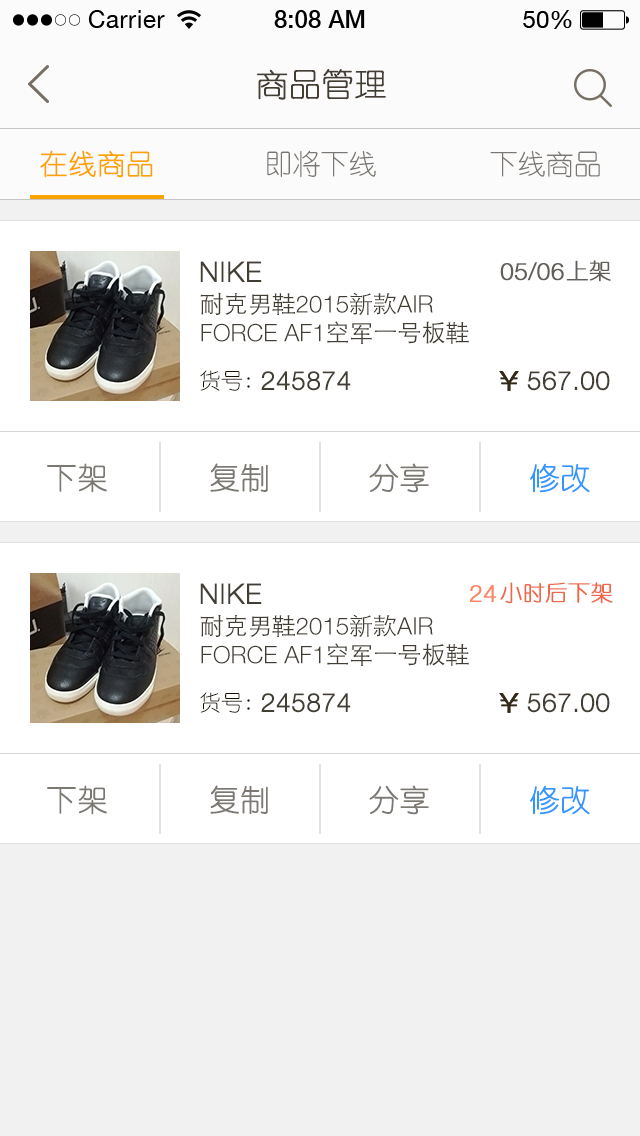
<style>
.page{position:relative;width:640px;height:1136px;background:#ffffff}
.page>*{position:absolute;margin:0}
.t1{font:32px "YouYuan";color:#433d33;text-transform:uppercase;font-weight:bold}
.t2{font:28px "YouYuan";color:#fea200;text-transform:uppercase;font-weight:bold}
.t3{font:28px "YouYuan";color:#7a7772;text-transform:uppercase}
.t4{font:28px "HelveticaNeueLTPro-Lt";color:#433e34;text-transform:uppercase;font-weight:bold}
.t5{font:24px "HelveticaNeueLTPro-Lt";color:#625e58;text-transform:uppercase;font-weight:bold}
.t6{font:22px "YouYuan";color:#625e58;text-transform:uppercase;font-weight:bold}
.t7{font:24px "HelveticaNeueLTPro-Lt";color:#433e34;text-transform:uppercase}
.t8{font:24px "STHeitiSC-Light";color:#433e34;text-transform:uppercase}
.t9{font:22px "YouYuan";color:#1b1100;text-transform:uppercase}
.t10{font:26px "HelveticaNeueLTPro-Lt";color:#433e34;text-transform:uppercase;font-weight:bold}
.t11{font:30px "YouYuan";color:#7c7973;text-transform:uppercase;font-weight:bold}
.t12{font:30px "YouYuan";color:#3496ff;text-transform:uppercase;font-weight:bold}
.t13{font:22px "YouYuan";color:#ef6746;text-transform:uppercase;font-weight:bold}
.t14{font:24px "HelveticaNeueLTPro-Lt";color:#ff8462;text-transform:uppercase;font-weight:bold}
</style>
<div class="page">
<p class="t1" style="left:257px;top:69px;width:129px;height:31px">商品管理</p>
<p class="t2" style="left:40px;top:150px;width:113px;height:28px">在线商品</p>
<p class="t3" style="left:267px;top:150px;width:109px;height:28px">即将下线</p>
<p class="t3" style="left:490px;top:150px;width:110px;height:28px">下线商品</p>
<p class="t4" style="left:200px;top:261px;width:62px;height:21px">NIKE</p>
<p class="t5" style="left:500px;top:262px;width:64px;height:19px">05/06</p>
<p class="t6" style="left:566px;top:260px;width:45px;height:22px">上架</p>
<p class="t7" style="left:200px;top:292px;width:269px;height:52px"><span class="t8">耐克男鞋</span>2015<span class="t8">新款</span>air force AF1<span class="t8">空军一号板鞋</span></p>
<p class="t9" style="left:200px;top:370px;width:50px;height:21px">货号:</p>
<p class="t10" style="left:261px;top:371px;width:90px;height:20px">245874</p>
<p class="t10" style="left:527px;top:371px;width:83px;height:20px">567.00</p>
<p class="t11" style="left:47px;top:463px;width:60px;height:30px">下架</p>
<p class="t11" style="left:210px;top:463px;width:58px;height:29px">复制</p>
<p class="t11" style="left:369px;top:463px;width:60px;height:30px">分享</p>
<p class="t12" style="left:530px;top:463px;width:60px;height:30px">修改</p>
<p class="t13" style="left:500px;top:582px;width:113px;height:22px">小时后下架</p>
<p class="t4" style="left:200px;top:583px;width:62px;height:21px">NIKE</p>
<p class="t14" style="left:469px;top:585px;width:28px;height:17px">24</p>
<p class="t7" style="left:200px;top:614px;width:269px;height:52px"><span class="t8">耐克男鞋</span>2015<span class="t8">新款</span>air force AF1<span class="t8">空军一号板鞋</span></p>
<p class="t9" style="left:200px;top:692px;width:50px;height:21px">货号:</p>
<p class="t10" style="left:261px;top:693px;width:90px;height:20px">245874</p>
<p class="t10" style="left:527px;top:693px;width:83px;height:20px">567.00</p>
<p class="t11" style="left:47px;top:785px;width:60px;height:30px">下架</p>
<p class="t11" style="left:210px;top:785px;width:58px;height:29px">复制</p>
<p class="t11" style="left:369px;top:785px;width:60px;height:30px">分享</p>
<p class="t12" style="left:530px;top:785px;width:60px;height:30px">修改</p>
</div>
